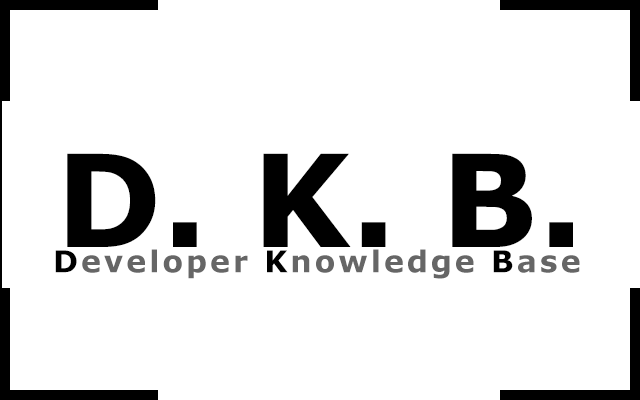
<style>
.page{position:relative;width:640px;height:400px;background:#ffffff}
.page>*{position:absolute;margin:0}
.t1{font:128px "Verdana-Bold";color:#000000}
.t2{font:30px "Verdana-Bold";letter-spacing:0.1em;color:#666666}
.t3{font:30px "Verdana-Bold";letter-spacing:0.1em;color:#000000}
</style>
<div class="page">
<p class="t1" style="left:67px;top:153px;width:506px;height:94px">D. K. B.</p>
<p class="t2" style="left:55px;top:249px;width:525px;height:30px"><span class="t3">D</span>eveloper<span class="t3"> K</span>nowledge<span class="t3"> B</span>ase</p>
</div>
